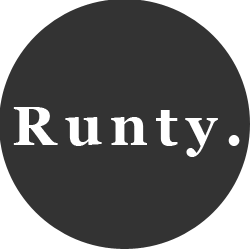
<style>
.page{position:relative;width:250px;height:250px;background:#333333}
.page>*{position:absolute;margin:0}
.t1{font:55px "Georgia-Bold";letter-spacing:0.15em;color:#ffffff}
</style>
<div class="page">
<p class="t1" style="left:13px;top:107px;width:227px;height:50px">Runty.</p>
</div>
